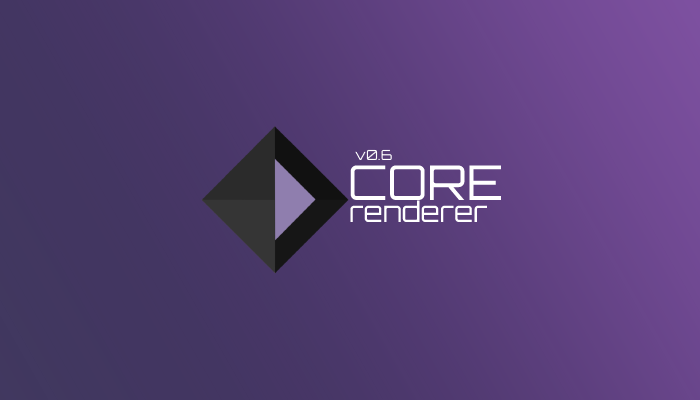
<style>
.page{position:relative;width:700px;height:400px}
.page>*{position:absolute;margin:0}
.t1{font:14px "Orbitron-Regular";color:#ffffff}
.t2{font:48px "Orbitron-Regular";color:#ffffff}
.t3{font:28px "Orbitron-Regular";color:#ffffff}
</style>
<div class="page">
<p class="t1" style="left:355px;top:149px;width:37px;height:11px">v0.6</p>
<p class="t2" style="left:350px;top:165px;width:152px;height:35px">CORE</p>
<p class="t3" style="left:350px;top:200px;width:138px;height:22px">renderer</p>
</div>
